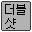
<style>
.page{position:relative;width:32px;height:32px;background:#b2b2b2}
.page>*{position:absolute;margin:0}
.t1{font:12px/14px "Gulim";letter-spacing:-0.08em;color:#000000}
</style>
<div class="page">
<p class="t1" style="left:5px;top:4px;width:21px;height:25px">더블<br>샷</p>
</div>
